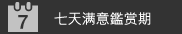
<style>
.page{position:relative;width:182px;height:34px;background:#333333}
.page>*{position:absolute;margin:0}
.t1{font:14px "MicrosoftJhengHeiRegular";color:#ffffff}
</style>
<div class="page">
<p class="t1" style="left:54px;top:12px;width:97px;height:13px">七天满意鑑赏期</p>
</div>
